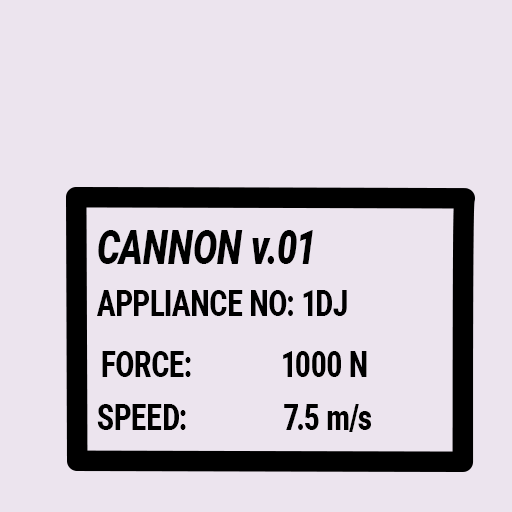
<style>
.page{position:relative;width:512px;height:512px;background:#ece4ee}
.page>*{position:absolute;margin:0}
.t1{font:48px "Roboto-BlackItalic";color:#000000;scale:0.75 1}
.t2{font:36px "Roboto-Black";color:#000000;scale:0.75 1}
</style>
<div class="page">
<p class="t1" style="left:98px;top:230px;width:215px;height:34px">CANNON v.01</p>
<p class="t2" style="left:97px;top:290px;width:250px;height:26px">APPLIANCE NO: 1DJ</p>
<p class="t2" style="left:102px;top:351px;width:265px;height:26px">FORCE:    1000 N</p>
<p class="t2" style="left:97px;top:404px;width:274px;height:28px">SPEED:    7.5 m/s</p>
</div>
